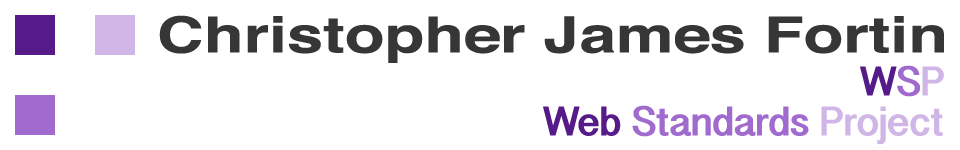
<style>
.page{position:relative;width:960px;height:150px;background:#ffffff}
.page>*{position:absolute;margin:0}
.t1{font:50px "Helvetica-Bold";color:#363636;scale:1.3 1}
.t2{font:41.7px "GurmukhiSangamMN-Bold";color:#561a89}
.t3{font:41.7px "GurmukhiSangamMN-Bold";color:#a06ace}
.t4{font:41.7px "GurmukhiSangamMN-Bold";color:#d0b5e7}
</style>
<div class="page">
<p class="t1" style="left:159px;top:15px;width:785px;height:48px">Christopher James Fortin</p>
<p class="t2" style="left:860px;top:65px;width:84px;height:32px">W<span class="t3">S</span><span class="t4">P</span></p>
<p class="t3" style="left:543px;top:105px;width:400px;height:40px"><span class="t2">Web </span>Standards <span class="t4">Project</span></p>
</div>
